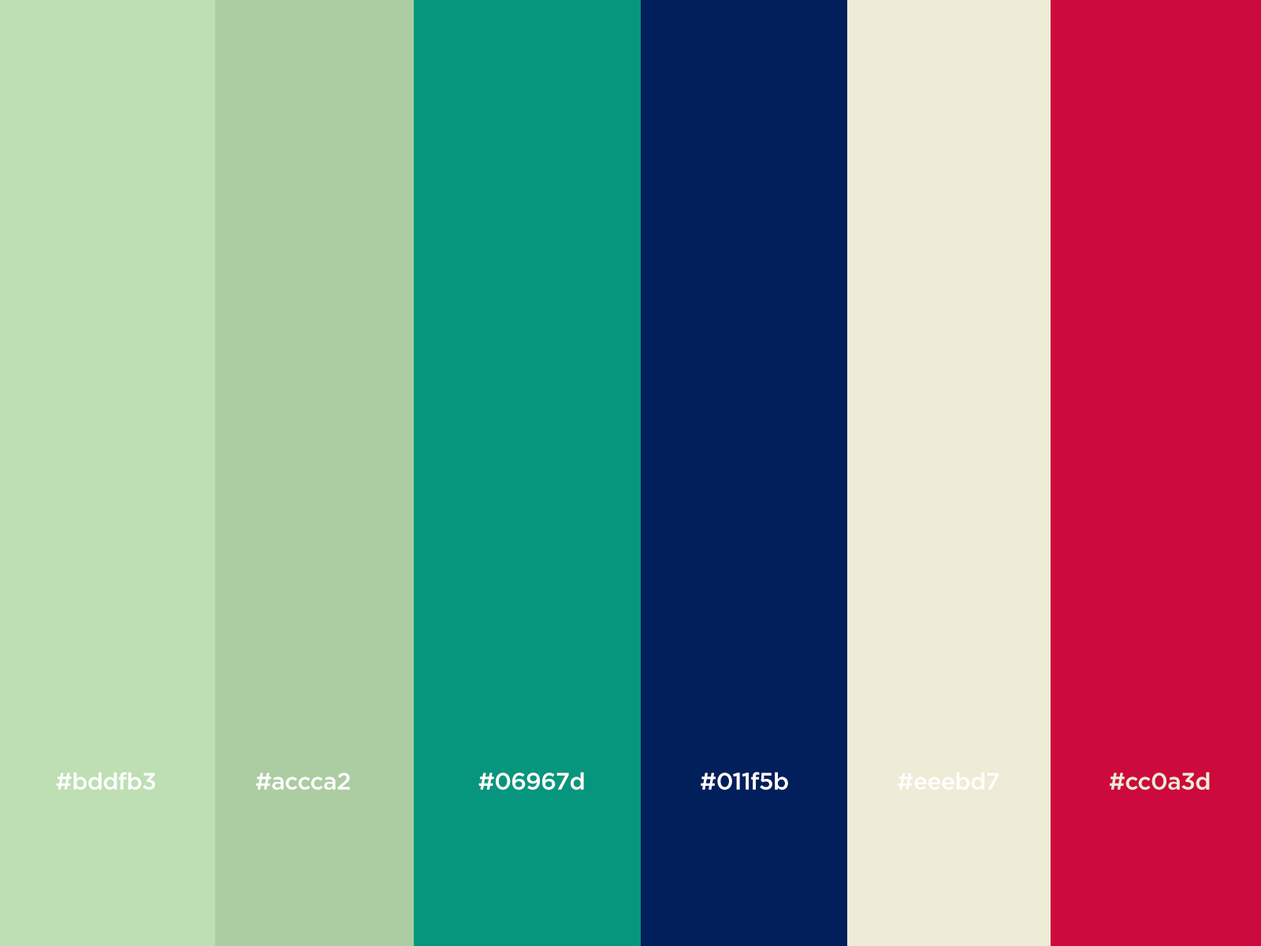
<style>
.page{position:relative;width:1261px;height:946px}
.page>*{position:absolute;margin:0}
.t1{font:23.6px "Gotham-Medium";letter-spacing:-0.02em;color:#ffffff}
.t2{font:23.6px "Gotham-Medium";letter-spacing:-0.02em;color:#fefefe}
.t3{font:23.6px "Gotham-Medium";letter-spacing:-0.02em;color:#eeebd7}
</style>
<div class="page">
<p class="t1" style="left:56px;top:772px;width:99px;height:18px">#bddfb3</p>
<p class="t1" style="left:256px;top:772px;width:94px;height:18px">#accca2</p>
<p class="t1" style="left:478px;top:772px;width:106px;height:18px">#06967d</p>
<p class="t1" style="left:701px;top:772px;width:87px;height:18px">#011f5b</p>
<p class="t2" style="left:898px;top:772px;width:101px;height:18px">#eeebd7</p>
<p class="t3" style="left:1110px;top:772px;width:100px;height:18px">#cc0a3d</p>
</div>
